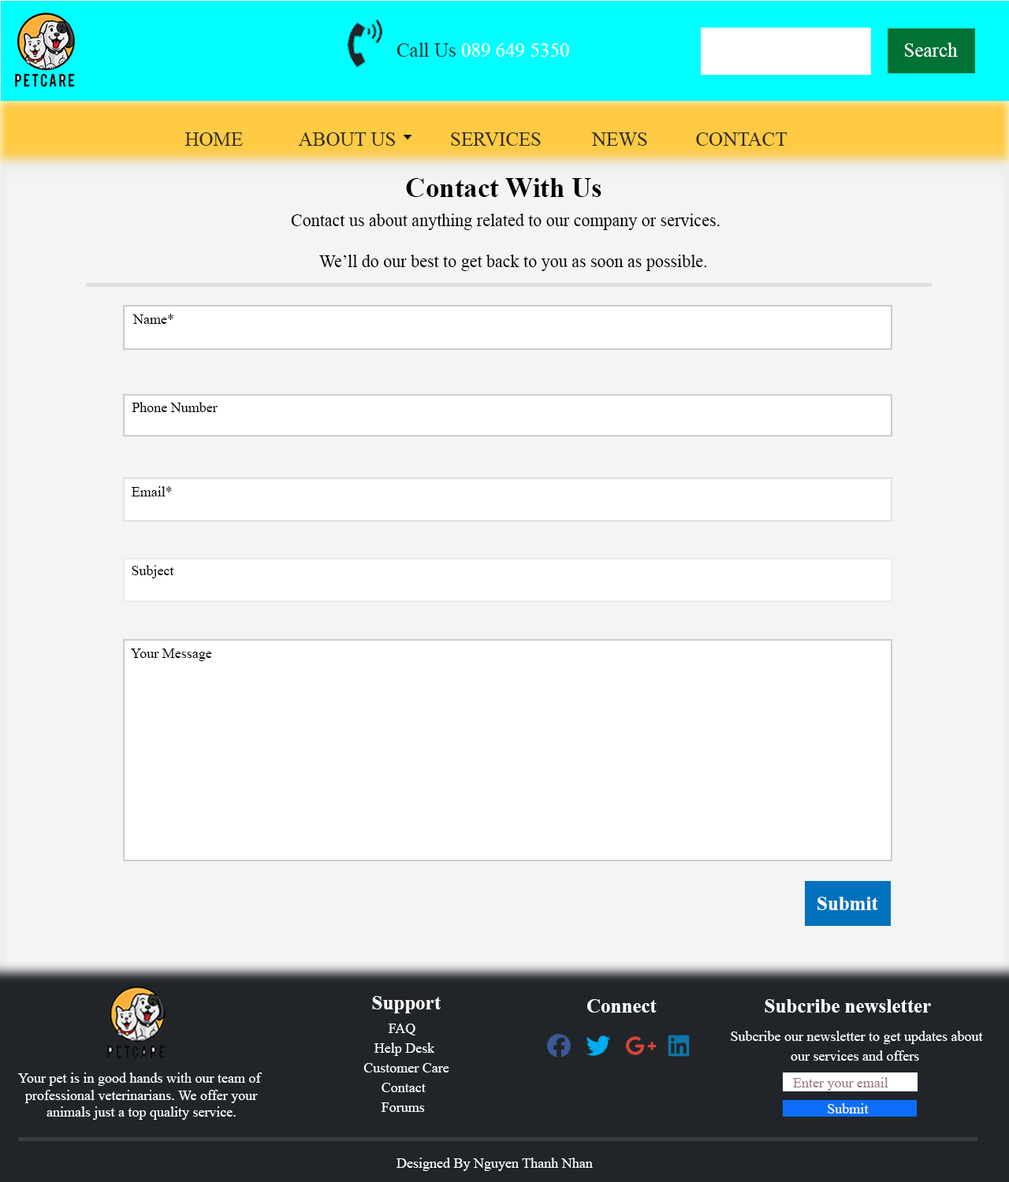
<style>
.page{position:relative;width:1009px;height:1182px;background:#f4f4f4}
.page>*{position:absolute;margin:0}
.t1{font:19.7px "TimesNewRomanPSMT";color:#ffffff}
.t2{font:19.7px "TimesNewRomanPSMT";color:#2c2c2c}
.t3{font:27.6px "TimesNewRomanPS-BoldMT";color:#000000}
.t4{font:17.3px "TimesNewRomanPSMT";color:#000000}
.t5{font:14.2px "TimesNewRomanPSMT";color:#000000}
.t6{font:19.7px "TimesNewRomanPS-BoldMT";color:#ffffff}
.t7{font:14.2px/19.7px "TimesNewRomanPSMT";color:#ffffff}
.t8{font:14.2px "TimesNewRomanPSMT";color:#ffffff}
.t9{font:14.2px "TimesNewRomanPSMT";color:#9b757d}
</style>
<div class="page">
<p class="t1" style="left:396px;top:43px;width:173px;height:14px"><span class="t2">Call Us </span>089 649 5350</p>
<p class="t1" style="left:904px;top:43px;width:54px;height:14px">Search</p>
<p class="t2" style="left:184px;top:132px;width:603px;height:15px">HOME  ABOUT US    SERVICES    NEWS  CONTACT</p>
<p class="t3" style="left:406px;top:178px;width:195px;height:19px">Contact With Us</p>
<p class="t4" style="left:291px;top:214px;width:429px;height:57px">Contact us about anything related to our company or services.<br><br> We’ll do our best to get back to you as soon as possible.</p>
<p class="t5" style="left:132px;top:314px;width:41px;height:10px">Name*</p>
<p class="t5" style="left:132px;top:402px;width:86px;height:10px">Phone Number</p>
<p class="t5" style="left:132px;top:486px;width:40px;height:10px">Email*</p>
<p class="t5" style="left:132px;top:565px;width:42px;height:13px">Subject</p>
<p class="t5" style="left:131px;top:649px;width:81px;height:12px">Your Message</p>
<p class="t6" style="left:817px;top:897px;width:61px;height:13px">Submit</p>
<p class="t6" style="left:372px;top:996px;width:69px;height:17px">Support</p>
<p class="t6" style="left:587px;top:999px;width:69px;height:14px">Connect</p>
<p class="t6" style="left:764px;top:999px;width:167px;height:14px">Subcribe newsletter</p>
<p class="t7" style="left:363px;top:1024px;width:86px;height:88px"><span class="t6"><br></span>        FAQ<br>    Help Desk<br> Customer Care<br>      Contact<br>      Forums</p>
<p class="t7" style="left:731px;top:1031px;width:252px;height:30px">Subcribe our newsletter to get updates about<br>   our services and offers</p>
<p class="t8" style="left:18px;top:1073px;width:244px;height:47px">Your pet is in good hands with our team of <br>   professional veterinarians. We offer your<br>  animals just a top quality service.</p>
<p class="t9" style="left:793px;top:1077px;width:95px;height:14px">Enter your email</p>
<p class="t8" style="left:827px;top:1103px;width:41px;height:11px">Submit</p>
<p class="t8" style="left:396px;top:1158px;width:197px;height:13px">Designed By Nguyen Thanh Nhan</p>
</div>
